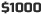
<style>
.page{position:relative;width:43px;height:15px;background:#ffffff}
.page>*{position:absolute;margin:0}
.t1{font:13.3px "RussoOne-Regular";color:#2c2c2c}
</style>
<div class="page">
<p class="t1" style="left:1px;top:1px;width:40px;height:13px">$1000</p>
</div>
